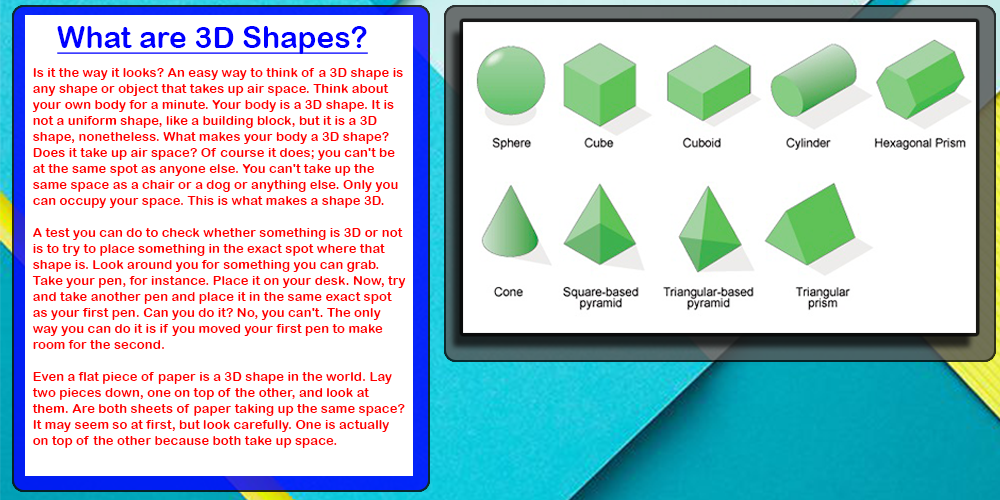
<style>
.page{position:relative;width:1000px;height:500px;background:#ffffff}
.page>*{position:absolute;margin:0}
.t1{font:30.4px "ArialRoundedMTBold";color:#0000ff;text-decoration:underline}
.t2{font:13.3px "ArialRoundedMTBold";color:#ff0000}
</style>
<div class="page">
<p class="t1" style="left:57px;top:26px;width:311px;height:28px">What are 3D Shapes?</p>
<p class="t2" style="left:32px;top:68px;width:374px;height:380px">Is it the way it looks? An easy way to think of a 3D shape is any shape or object that takes up air space. Think about your own body for a minute. Your body is a 3D shape. It is not a uniform shape, like a building block, but it is a 3D shape, nonetheless. What makes your body a 3D shape? Does it take up air space? Of course it does; you can't be at the same spot as anyone else. You can't take up the same space as a chair or a dog or anything else. Only you can occupy your space. This is what makes a shape 3D.<br><br>A test you can do to check whether something is 3D or not is to try to place something in the exact spot where that shape is. Look around you for something you can grab. Take your pen, for instance. Place it on your desk. Now, try and take another pen and place it in the same exact spot as your first pen. Can you do it? No, you can't. The only way you can do it is if you moved your first pen to make room for the second.<br><br>Even a flat piece of paper is a 3D shape in the world. Lay two pieces down, one on top of the other, and look at them. Are both sheets of paper taking up the same space? It may seem so at first, but look carefully. One is actually on top of the other because both take up space.</p>
</div>
